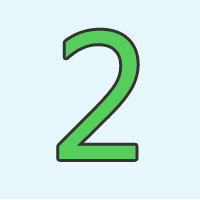
<style>
.page{position:relative;width:200px;height:200px;background:#e7f6fa}
.page>*{position:absolute;margin:0}
.t1{font:180px "MicrosoftPhagsPa";color:#56ce5b}
</style>
<div class="page">
<p class="t1" style="left:59px;top:30px;width:78px;height:129px">2</p>
</div>
